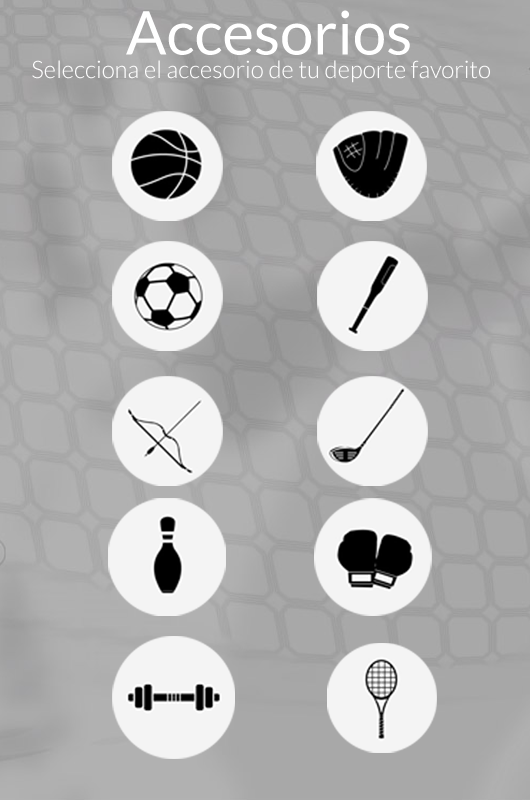
<style>
.page{position:relative;width:530px;height:800px}
.page>*{position:absolute;margin:0}
.t1{font:60px "Lato-Regular";color:#ffffff}
.t2{font:24px "Lato-Light";color:#ffffff}
</style>
<div class="page">
<p class="t1" style="left:126px;top:10px;width:284px;height:45px">Accesorios</p>
<p class="t2" style="left:32px;top:60px;width:458px;height:23px">Selecciona el accesorio de tu deporte favorito</p>
</div>
